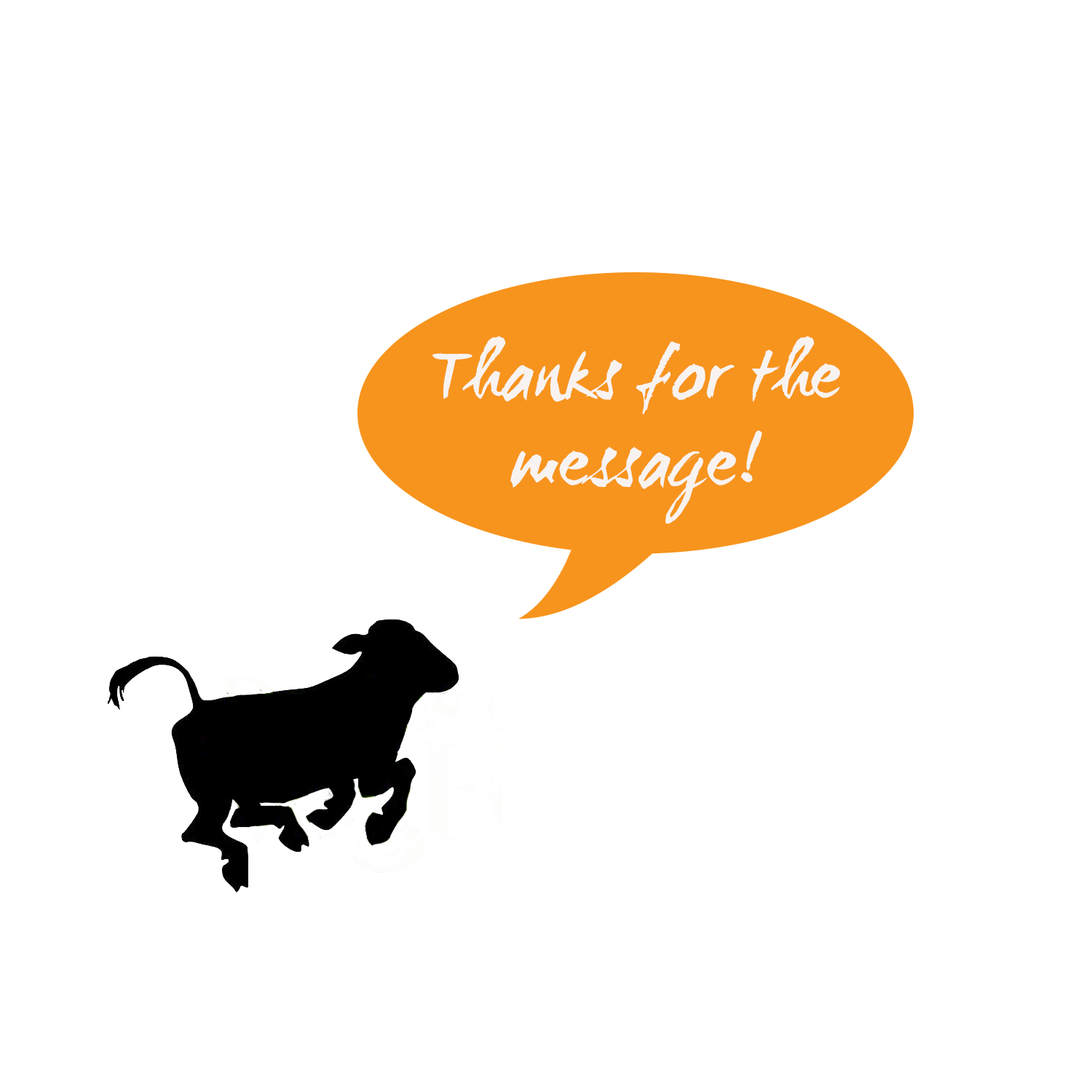
<style>
.page{position:relative;width:1092px;height:1092px;background:#ffffff}
.page>*{position:absolute;margin:0}
.t1{font:72.8px "WCManoNegraBta";color:#f8f3f0}
</style>
<div class="page">
<p class="t1" style="left:432px;top:336px;width:408px;height:188px;text-align:center">Thanks for the message!</p>
</div>
